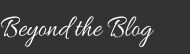
<style>
.page{position:relative;width:190px;height:54px;background:#333333}
.page>*{position:absolute;margin:0}
.t1{font:31.5px "Allura-Regular";color:#ffffff;scale:0.85 1}
</style>
<div class="page">
<p class="t1" style="left:0px;top:16px;width:154px;height:31px">Beyond the Blog</p>
</div>
